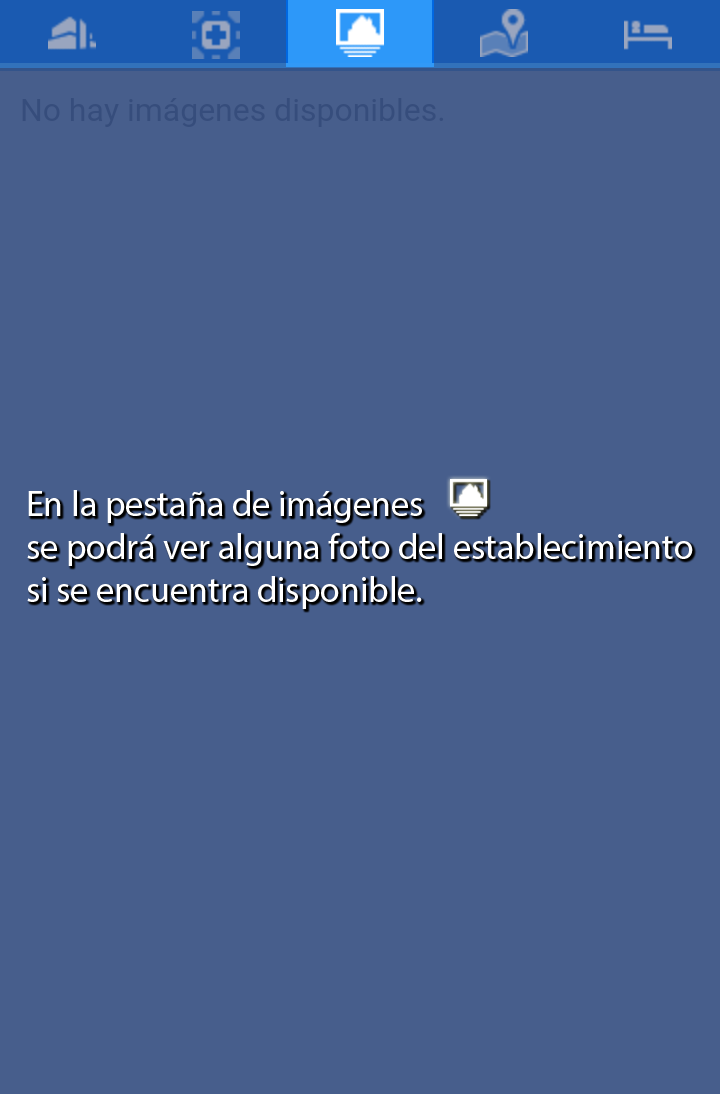
<style>
.page{position:relative;width:720px;height:1094px;background:#475e8c}
.page>*{position:absolute;margin:0}
.t1{font:36px "MyriadPro-Regular";color:#ffffff}
</style>
<div class="page">
<p class="t1" style="left:27px;top:490px;width:666px;height:119px">En la pestaña de imágenes<br>se podrá ver alguna foto del establecimiento<br>si se encuentra disponible.</p>
</div>
